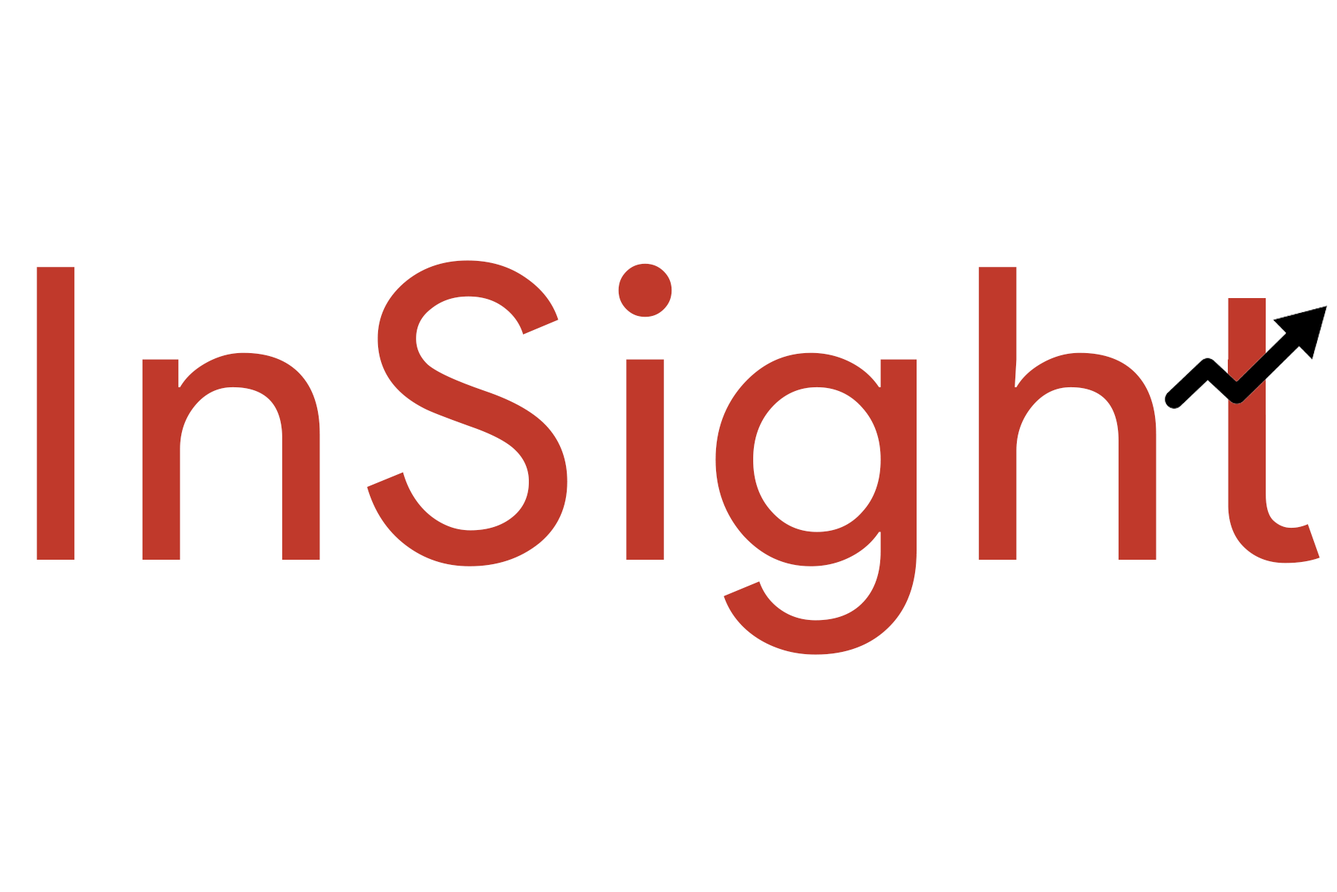
<style>
.page{position:relative;width:1337px;height:892px;background:#ffffff}
.page>*{position:absolute;margin:0}
.t1{font:408.7px "ProductSans-Regular";letter-spacing:0.04em;color:#c0392b}
</style>
<div class="page">
<p class="t1" style="left:36px;top:260px;width:1284px;height:395px">InSight</p>
</div>
